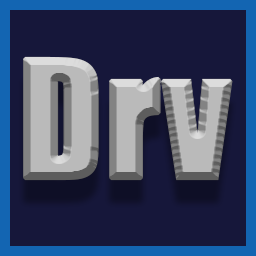
<style>
.page{position:relative;width:256px;height:256px;background:#16173a}
.page>*{position:absolute;margin:0}
.t1{font:150px "Impact";font-weight:bold}
</style>
<div class="page">
<p class="t1" style="left:23px;top:56px;width:210px;height:125px">Drv</p>
</div>
